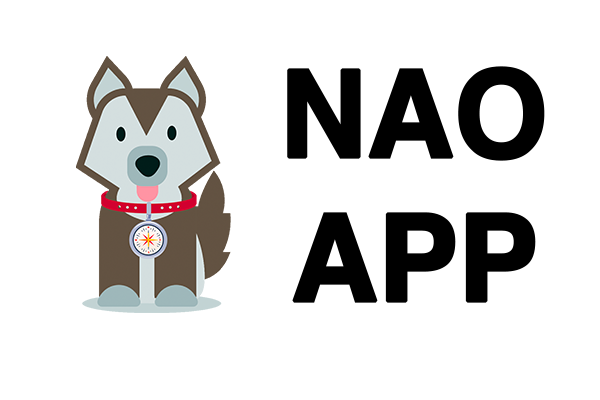
<style>
.page{position:relative;width:600px;height:400px;background:#ffffff}
.page>*{position:absolute;margin:0}
.t1{font:120px "Helvetica-Bold";letter-spacing:-0.025em;color:#000000;font-weight:bold}
</style>
<div class="page">
<p class="t1" style="left:287px;top:66px;width:258px;height:237px;text-align:center">NAO<br>APP</p>
</div>
